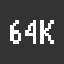
<style>
.page{position:relative;width:64px;height:64px;background:#333333}
.page>*{position:absolute;margin:0}
.t1{font:40.9px "Glasstown-NBP";letter-spacing:0.005em;color:#ffffff;font-weight:bold}
</style>
<div class="page">
<p class="t1" style="left:10px;top:20px;width:44px;height:24px">64K</p>
</div>
